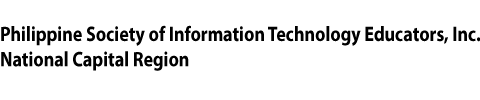
<style>
.page{position:relative;width:480px;height:100px;background:#ffffff}
.page>*{position:absolute;margin:0}
.t1{font:21.1px "MyriadPro-Bold";color:#000000;scale:0.85 1}
</style>
<div class="page">
<p class="t1" style="left:1px;top:25px;width:480px;height:46px">Philippine Society of Information Technology Educators, Inc.<br>National Capital Region</p>
</div>
